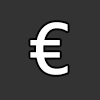
<style>
.page{position:relative;width:100px;height:100px;background:#333333}
.page>*{position:absolute;margin:0}
.t1{font:80px "Consolas";color:#ffffff;text-transform:uppercase}
</style>
<div class="page">
<p class="t1" style="left:30px;top:22px;width:38px;height:53px">€</p>
</div>
